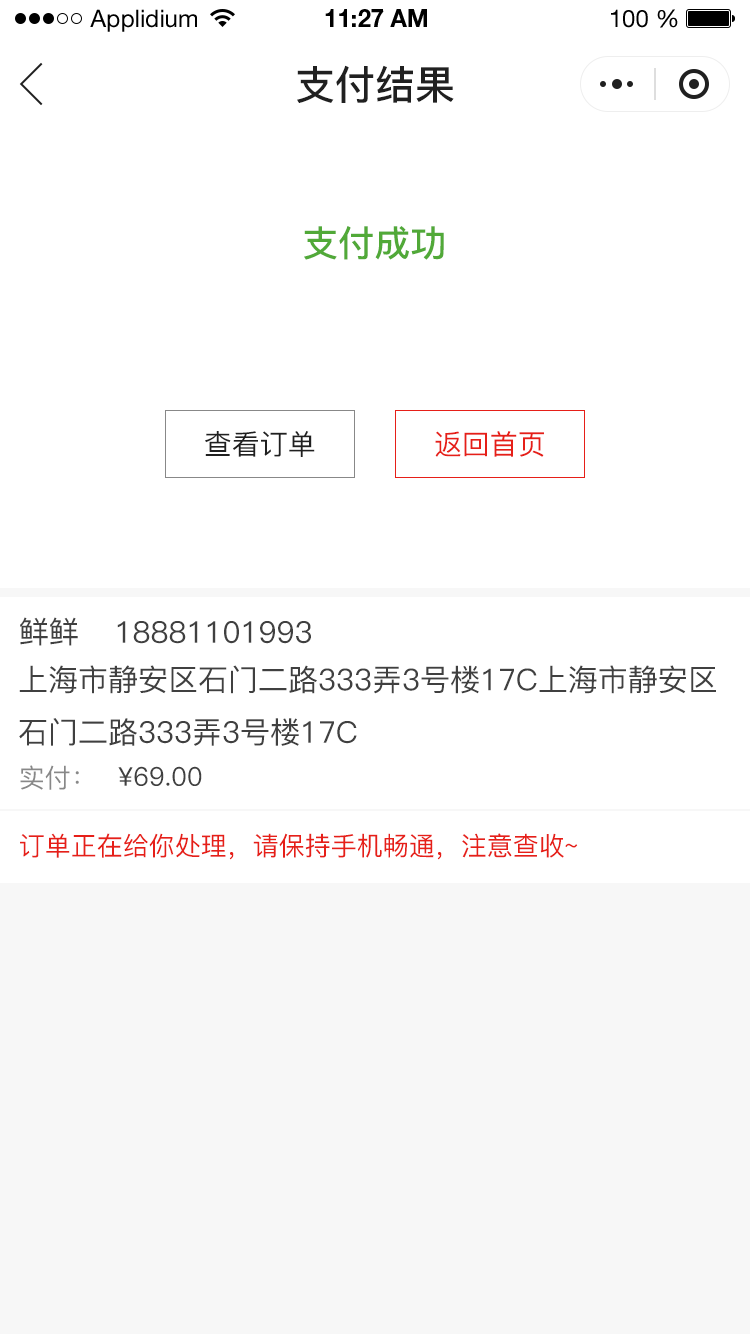
<style>
.page{position:relative;width:750px;height:1334px;background:#ffffff}
.page>*{position:absolute;margin:0}
.t1{font:24px "HelveticaNeueLTStd-Roman";color:#000000}
.t2{font:24px "HelveticaNeueLTStd-Bd";color:#000000}
.t3{font:40px "PingFang-SC-Bold";color:#202020;text-transform:uppercase}
.t4{font:36px "PingFang-SC-Bold";color:#51a938;text-transform:uppercase}
.t5{font:28px "PingFang-SC-Medium";color:#202020;text-transform:uppercase}
.t6{font:28px "PingFang-SC-Medium";color:#e61f18;text-transform:uppercase}
.t7{font:30px "PingFang-SC-Medium";color:#404040;text-transform:uppercase}
.t8{font:26px "PingFang-SC-Medium";color:#888888;text-transform:uppercase}
.t9{font:26px "PingFang-SC-Medium";color:#404040;text-transform:uppercase}
.t10{font:26px "PingFang-SC-Medium";color:#e61f18;text-transform:uppercase}
</style>
<div class="page">
<p class="t1" style="left:90px;top:9px;width:107px;height:23px">Applidium</p>
<p class="t2" style="left:325px;top:9px;width:102px;height:18px">11:27 AM</p>
<p class="t1" style="left:611px;top:9px;width:67px;height:19px">100 %</p>
<p class="t3" style="left:297px;top:65px;width:157px;height:38px">支付结果</p>
<p class="t4" style="left:304px;top:226px;width:140px;height:34px">支付成功</p>
<p class="t5" style="left:205px;top:431px;width:110px;height:26px">查看订单</p>
<p class="t6" style="left:435px;top:431px;width:109px;height:26px">返回首页</p>
<p class="t7" style="left:20px;top:617px;width:58px;height:29px">鲜鲜</p>
<p class="t7" style="left:117px;top:621px;width:194px;height:23px">18881101993</p>
<p class="t7" style="left:19px;top:665px;width:697px;height:81px">上海市静安区石门二路333弄3号楼17c上海市静安区<br>石门二路333弄3号楼17c</p>
<p class="t8" style="left:20px;top:765px;width:59px;height:25px">实付：</p>
<p class="t9" style="left:118px;top:766px;width:84px;height:20px">¥69.00</p>
<p class="t10" style="left:20px;top:833px;width:558px;height:27px">订单正在给你处理，请保持手机畅通，注意查收~</p>
</div>
